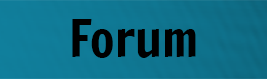
<style>
.page{position:relative;width:267px;height:79px}
.page>*{position:absolute;margin:0}
.t1{font:50px "FrancoisOne-Regular";color:#000000}
</style>
<div class="page">
<p class="t1" style="left:72px;top:19px;width:124px;height:39px">Forum</p>
</div>
